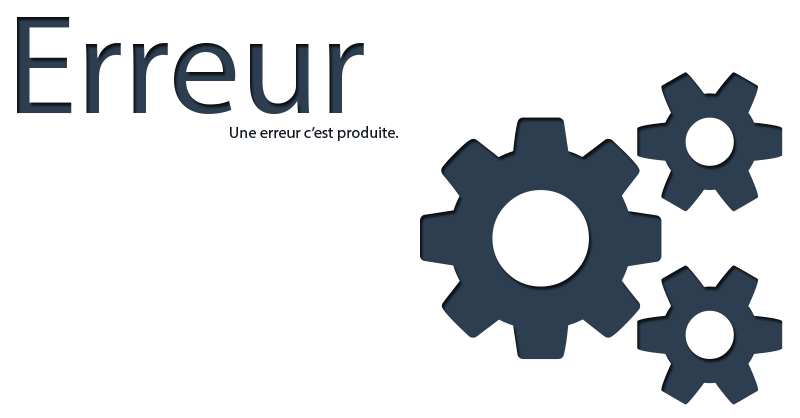
<style>
.page{position:relative;width:800px;height:418px;background:#ffffff}
.page>*{position:absolute;margin:0}
.t1{font:142.9px "MyriadPro-Regular";color:#2d3e50}
.t2{font:16.2px "MyriadPro-Regular";color:#141b23}
</style>
<div class="page">
<p class="t1" style="left:17px;top:17px;width:347px;height:98px">Erreur</p>
<p class="t2" style="left:230px;top:126px;width:169px;height:15px">Une erreur c’est produite.</p>
</div>
